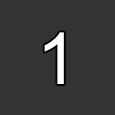
<style>
.page{position:relative;width:115px;height:115px;background:#333333}
.page>*{position:absolute;margin:0}
.t1{font:72px "ArialMT";letter-spacing:-0.02em;color:#ffffff}
</style>
<div class="page">
<p class="t1" style="left:44px;top:32px;width:20px;height:52px">1</p>
</div>
